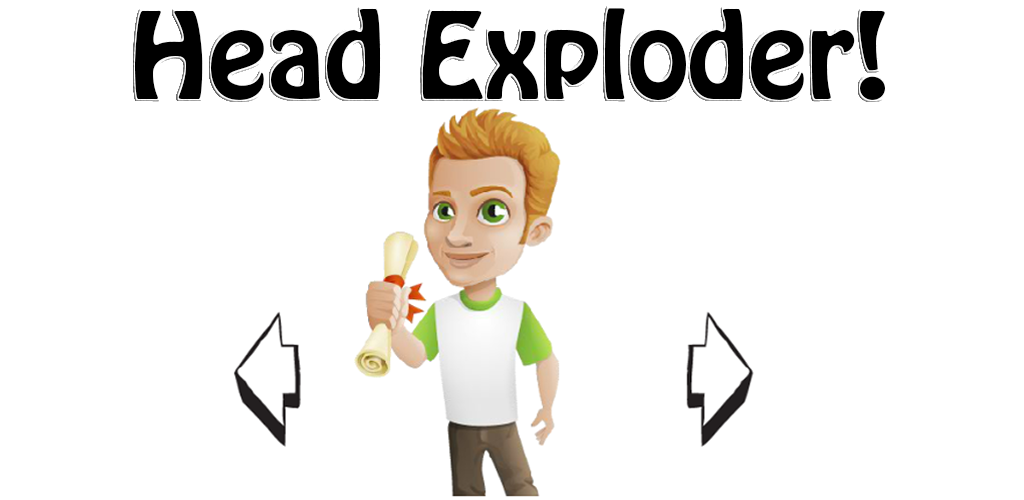
<style>
.page{position:relative;width:1024px;height:500px;background:#ffffff}
.page>*{position:absolute;margin:0}
.t1{font:106.2px "HoboStd";color:#000000;scale:1.05 1}
</style>
<div class="page">
<p class="t1" style="left:135px;top:8px;width:750px;height:92px">Head Exploder!</p>
</div>
